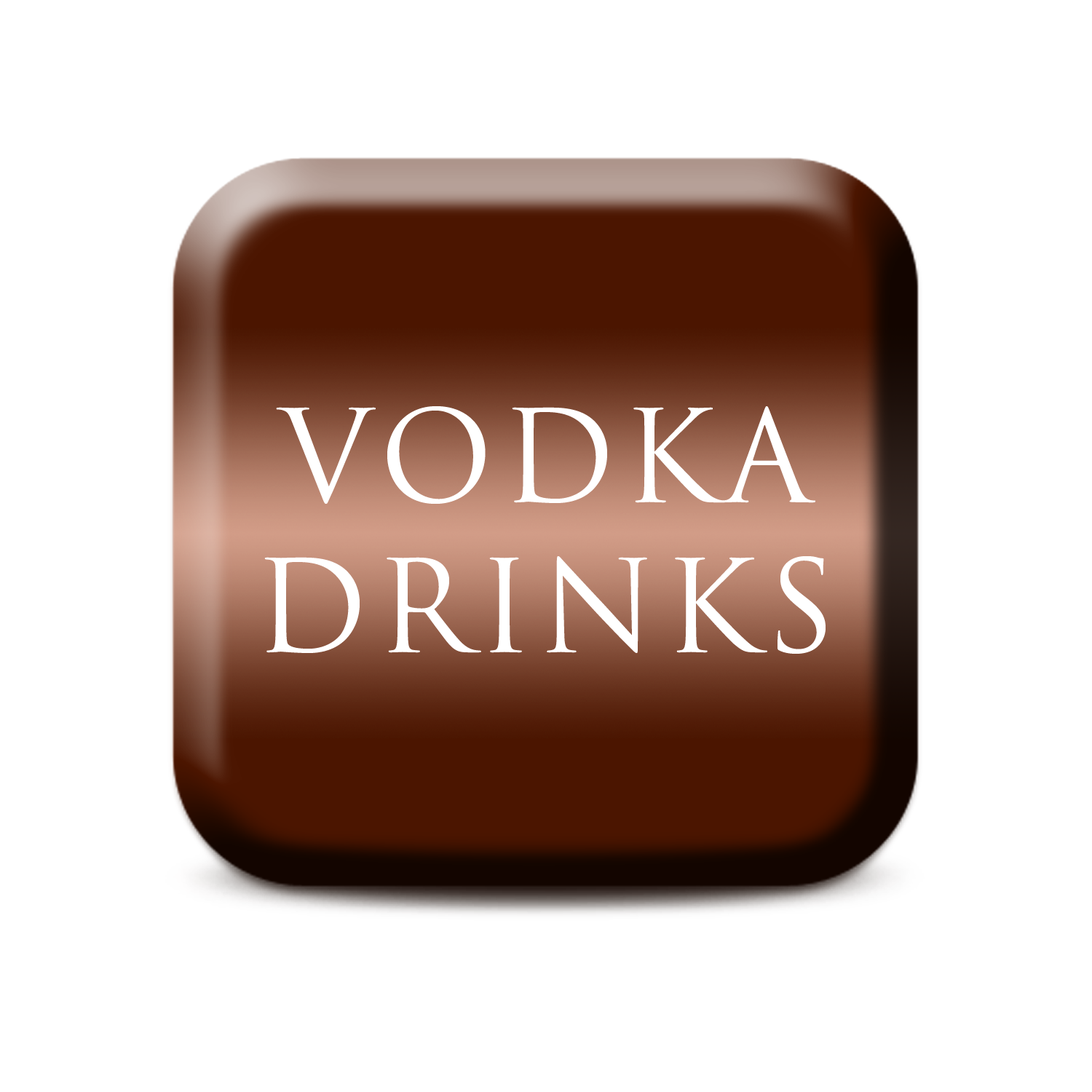
<style>
.page{position:relative;width:1092px;height:1092px;background:#ffffff}
.page>*{position:absolute;margin:0}
.t1{font:124.5px "TrajanPro-Regular";letter-spacing:0.06em;color:#ffffff}
</style>
<div class="page">
<p class="t1" style="left:264px;top:406px;width:562px;height:248px;text-align:center">VODKA<br>DRINKS</p>
</div>
